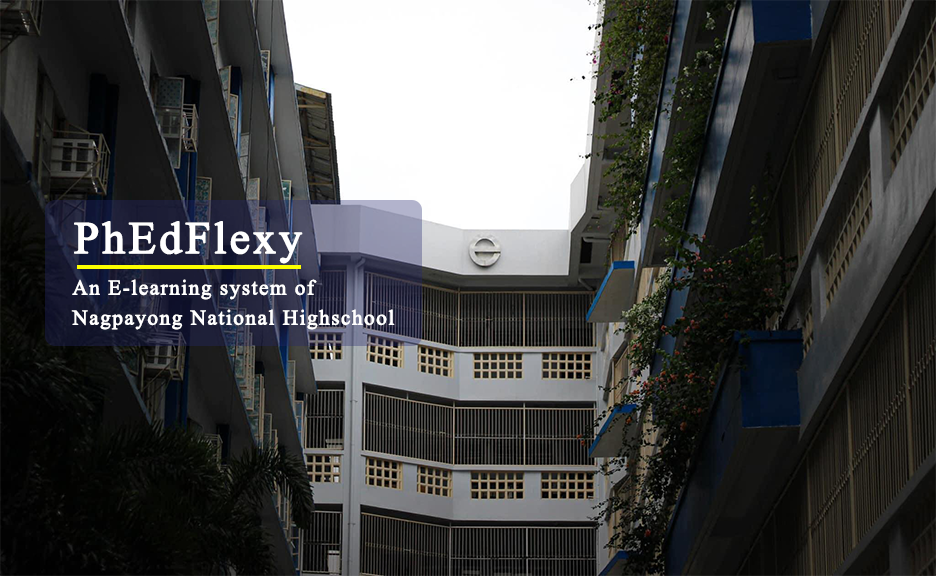
<style>
.page{position:relative;width:936px;height:576px}
.page>*{position:absolute;margin:0}
.t1{font:45px "TimesNewRomanPSMT";letter-spacing:0.05em;color:#ffffff;font-weight:bold}
.t2{font:21px/30px "TimesNewRomanPSMT";letter-spacing:0.05em;color:#ffffff;font-weight:bold}
</style>
<div class="page">
<p class="t1" style="left:74px;top:221px;width:229px;height:43px">PhEdFlexy</p>
<p class="t2" style="left:71px;top:279px;width:324px;height:51px">An E-learning system of<br>Nagpayong National Highschool</p>
</div>
